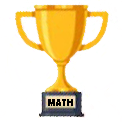
<style>
.page{position:relative;width:122px;height:122px;background:#ffffff}
.page>*{position:absolute;margin:0}
.t1{font:10px "FranklinGothic-Heavy";color:#000000}
</style>
<div class="page">
<p class="t1" style="left:48px;top:99px;width:25px;height:7px">MATH</p>
</div>
